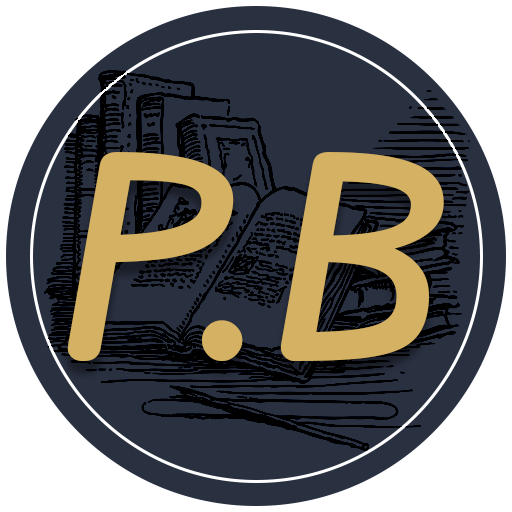
<style>
.page{position:relative;width:512px;height:512px;background:#293040}
.page>*{position:absolute;margin:0}
.t1{font:225px "EduAUVICWANTHand-Bold";letter-spacing:0.025em;color:#d5b263}
.t2{font:225px "Montserrat-ExtraBold";letter-spacing:0.025em;color:#ff0000}
</style>
<div class="page">
<p class="t1" style="left:67px;top:152px;width:377px;height:209px"><span class="t2"> </span>P.B</p>
</div>
